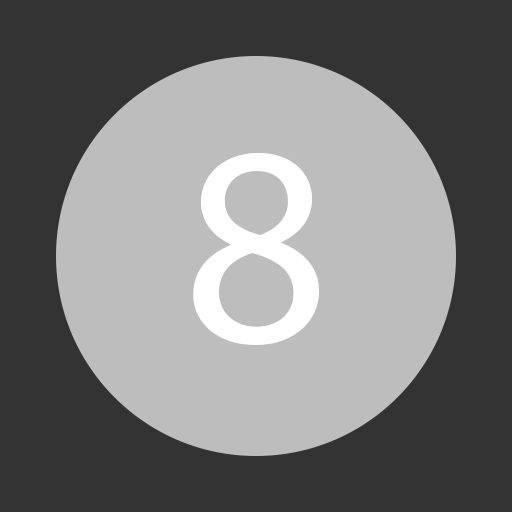
<style>
.page{position:relative;width:512px;height:512px;background:#333333}
.page>*{position:absolute;margin:0}
.t1{font:286px "MyriadPro-Regular";color:#ffffff}
</style>
<div class="page">
<p class="t1" style="left:193px;top:153px;width:126px;height:192px">8</p>
</div>
